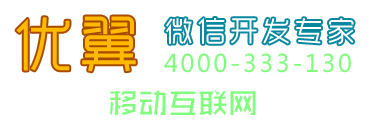
<style>
.page{position:relative;width:380px;height:120px;background:#ffffff}
.page>*{position:absolute;margin:0}
.t1{font:60px "RTWSYueGoTrial-Regular";letter-spacing:0.1em;color:#ffba00}
.t2{font:28px "RTWSYueGoTrial-Regular";letter-spacing:0.16em;color:#ffffff}
.t3{font:24px "MicrosoftYaHei";letter-spacing:0.1em;color:#82fe7f}
</style>
<div class="page">
<p class="t1" style="left:16px;top:16px;width:120px;height:56px">优翼</p>
<p class="t2" style="left:165px;top:18px;width:189px;height:27px">微信开发专家</p>
<p class="t3" style="left:164px;top:53px;width:187px;height:20px">4000-333-130</p>
</div>
